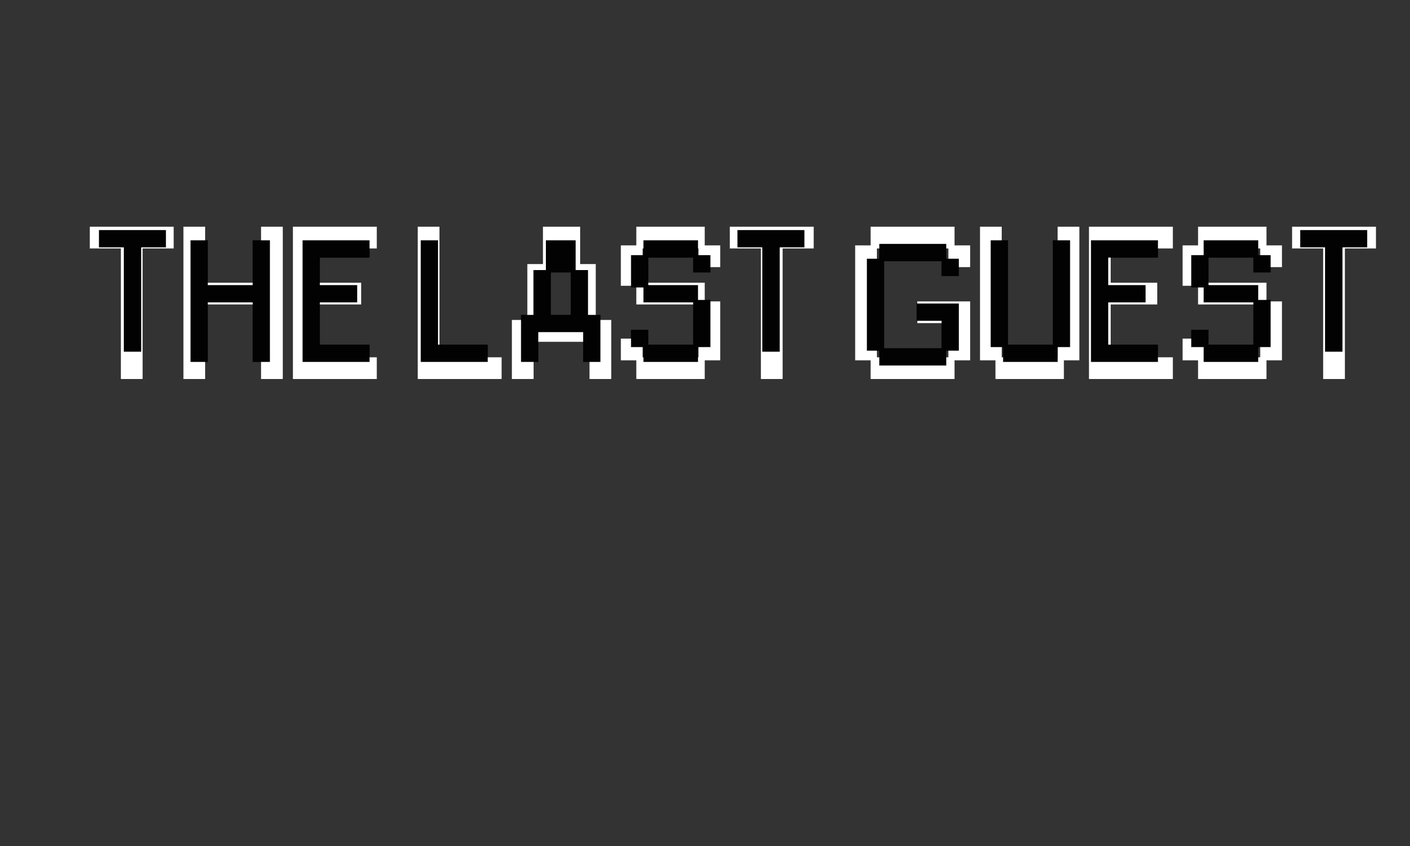
<style>
.page{position:relative;width:1410px;height:846px;background:#333333}
.page>*{position:absolute;margin:0}
.t1{font:198.9px "Small Fonts";font-weight:bold}
.t2{font:159.1px "Small Fonts";color:#020202;font-weight:bold}
</style>
<div class="page">
<p class="t1" style="left:90px;top:227px;width:1286px;height:152px">THE LAST GUEST</p>
<p class="t2" style="left:99px;top:230px;width:67px;height:122px">T</p>
<p class="t2" style="left:737px;top:230px;width:68px;height:122px">T</p>
<p class="t2" style="left:1300px;top:230px;width:67px;height:122px">T</p>
<p class="t2" style="left:190px;top:240px;width:80px;height:122px">H</p>
<p class="t2" style="left:302px;top:240px;width:68px;height:122px">E</p>
<p class="t2" style="left:420px;top:240px;width:68px;height:122px">L</p>
<p class="t2" style="left:521px;top:240px;width:79px;height:122px">A</p>
<p class="t2" style="left:631px;top:240px;width:79px;height:122px">S</p>
<p class="t2" style="left:866px;top:243px;width:93px;height:123px">G</p>
<p class="t2" style="left:990px;top:240px;width:80px;height:122px">U</p>
<p class="t2" style="left:1090px;top:240px;width:68px;height:122px">E</p>
<p class="t2" style="left:1191px;top:240px;width:79px;height:122px">S</p>
</div>
